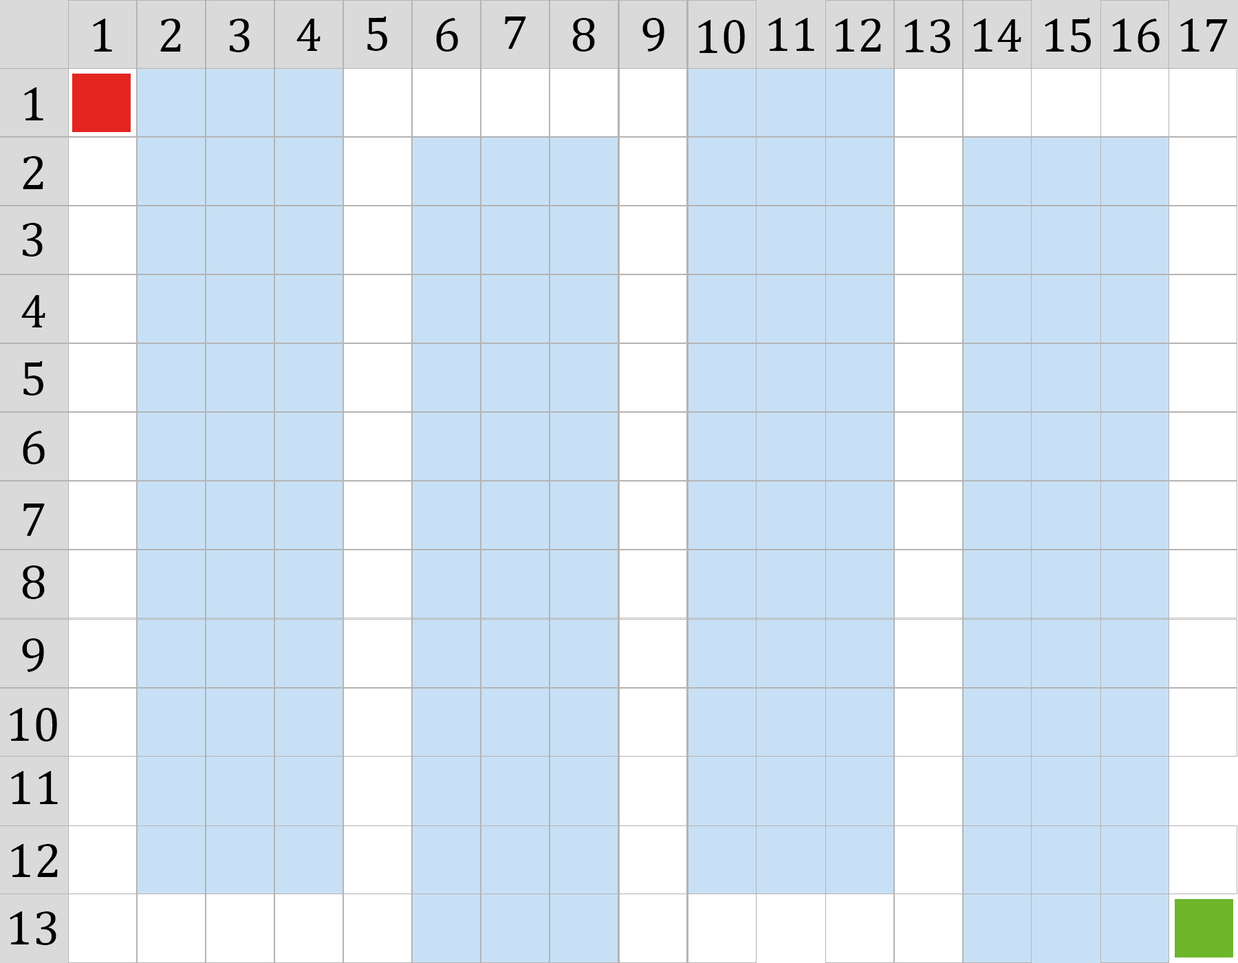
<style>
.page{position:relative;width:1238px;height:963px;background:#c8e0f5}
.page>*{position:absolute;margin:0}
.t1{font:48.5px "Cambria";color:#000000}
</style>
<div class="page">
<p class="t1" style="left:367px;top:17px;width:20px;height:34px">5</p>
<p class="t1" style="left:436px;top:18px;width:22px;height:34px">6</p>
<p class="t1" style="left:505px;top:17px;width:21px;height:32px">7</p>
<p class="t1" style="left:572px;top:18px;width:23px;height:34px">8</p>
<p class="t1" style="left:642px;top:18px;width:22px;height:34px">9</p>
<p class="t1" style="left:768px;top:18px;width:46px;height:33px">11</p>
<p class="t1" style="left:1045px;top:18px;width:46px;height:34px">15</p>
<p class="t1" style="left:93px;top:19px;width:19px;height:33px">1</p>
<p class="t1" style="left:160px;top:19px;width:21px;height:33px">2</p>
<p class="t1" style="left:230px;top:19px;width:20px;height:33px">3</p>
<p class="t1" style="left:296px;top:19px;width:25px;height:32px">4</p>
<p class="t1" style="left:698px;top:20px;width:47px;height:34px">10</p>
<p class="t1" style="left:835px;top:19px;width:46px;height:33px">12</p>
<p class="t1" style="left:905px;top:19px;width:46px;height:34px">13</p>
<p class="t1" style="left:973px;top:19px;width:49px;height:33px">14</p>
<p class="t1" style="left:1112px;top:19px;width:48px;height:33px">16</p>
<p class="t1" style="left:1180px;top:19px;width:48px;height:33px">17</p>
<p class="t1" style="left:24px;top:87px;width:19px;height:33px">1</p>
<p class="t1" style="left:23px;top:156px;width:20px;height:33px">2</p>
<p class="t1" style="left:23px;top:223px;width:20px;height:34px">3</p>
<p class="t1" style="left:21px;top:295px;width:24px;height:32px">4</p>
<p class="t1" style="left:23px;top:361px;width:20px;height:35px">5</p>
<p class="t1" style="left:23px;top:431px;width:22px;height:33px">6</p>
<p class="t1" style="left:23px;top:504px;width:22px;height:32px">7</p>
<p class="t1" style="left:22px;top:565px;width:23px;height:34px">8</p>
<p class="t1" style="left:22px;top:638px;width:22px;height:34px">9</p>
<p class="t1" style="left:10px;top:708px;width:47px;height:34px">10</p>
<p class="t1" style="left:11px;top:771px;width:47px;height:33px">11</p>
<p class="t1" style="left:11px;top:844px;width:47px;height:33px">12</p>
<p class="t1" style="left:10px;top:911px;width:46px;height:34px">13</p>
</div>
